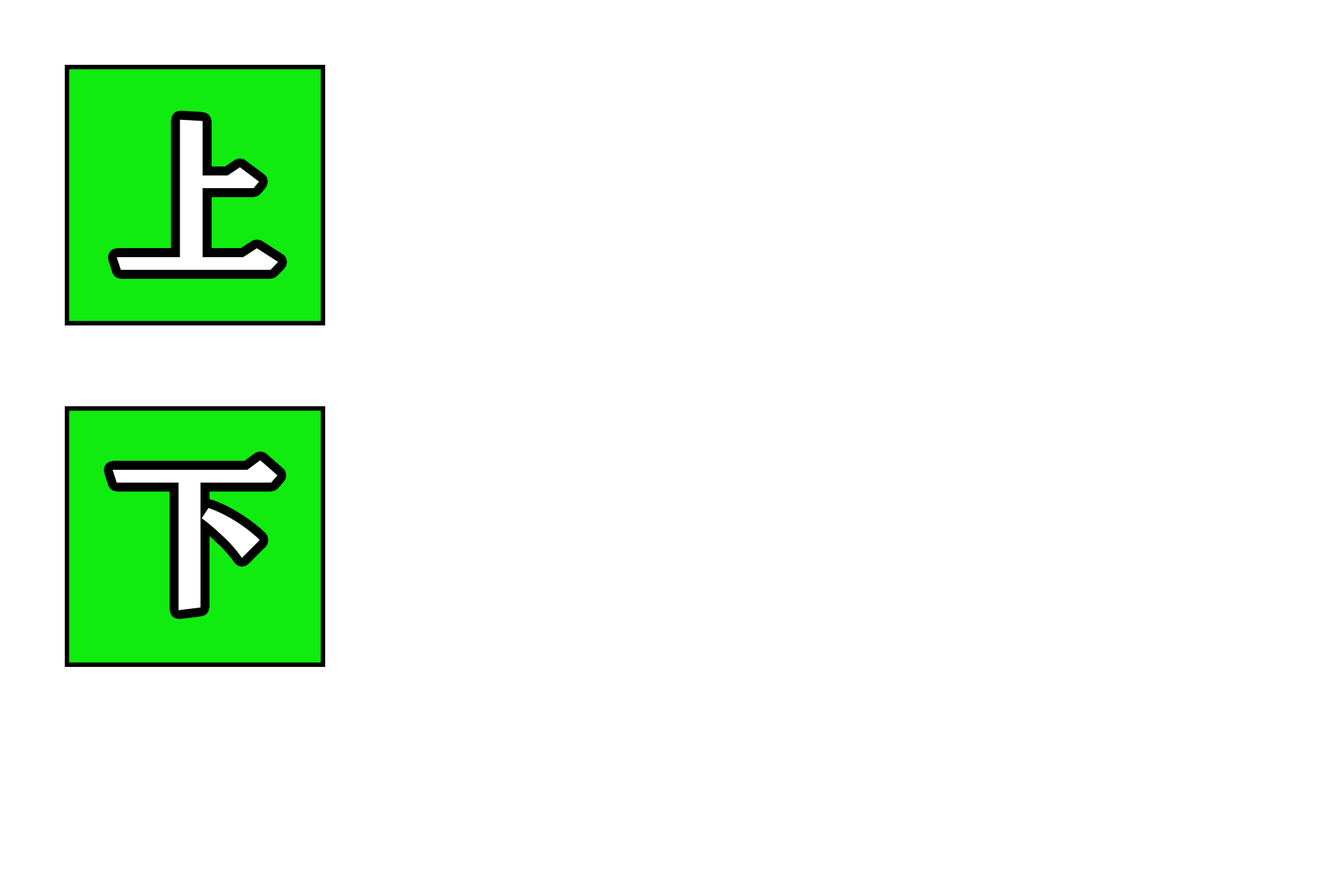
<style>
.page{position:relative;width:1337px;height:892px;background:#ffffff}
.page>*{position:absolute;margin:0}
.t1{font:174.1px "HGPSoeiPresenceEB";letter-spacing:0.02em;color:#ffffff}
</style>
<div class="page">
<p class="t1" style="left:116px;top:119px;width:163px;height:151px">上</p>
<p class="t1" style="left:112px;top:460px;width:166px;height:150px">下</p>
</div>
